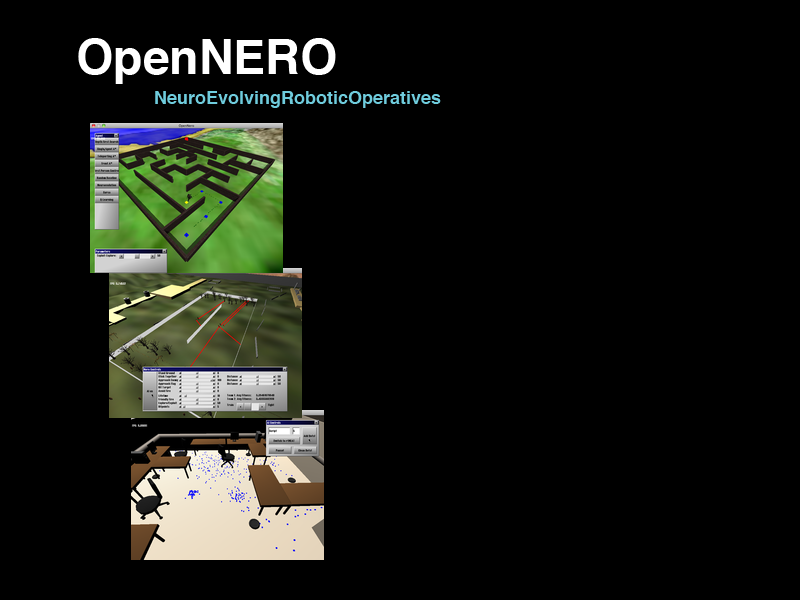
<style>
.page{position:relative;width:800px;height:600px;background:#000000}
.page>*{position:absolute;margin:0}
.t1{font:48px "Helvetica-Bold";color:#ffffff}
.t2{font:18px "Helvetica-Bold";color:#6fccdd}
</style>
<div class="page">
<p class="t1" style="left:78px;top:38px;width:258px;height:46px">OpenNERO</p>
<p class="t2" style="left:155px;top:91px;width:286px;height:17px">NeuroEvolvingRoboticOperatives</p>
</div>
